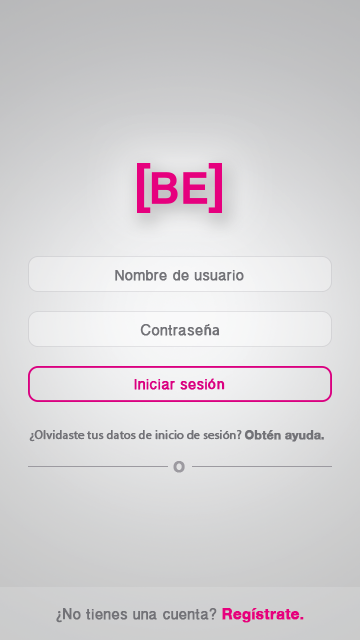
<style>
.page{position:relative;width:360px;height:640px}
.page>*{position:absolute;margin:0}
.t1{font:15px "MyanmarSangamMN";color:#727277;font-weight:bold}
.t2{font:15px "MyriadPro-Regular";color:#727277;font-weight:bold}
.t3{font:15px "MyanmarSangamMN";color:#da0080;font-weight:bold}
.t4{font:15px "MyriadPro-Regular";color:#da0080;font-weight:bold}
.t5{font:12px "MyriadPro-Regular";color:#727277;font-weight:bold}
.t6{font:12px "HelveticaNeue-Bold";color:#727277;font-weight:bold}
.t7{font:15px "HelveticaNeue-Bold";color:#9c9aa0;font-weight:bold}
.t8{font:15px "HelveticaNeue-Bold";color:#e6007e;font-weight:bold}
</style>
<div class="page">
<p class="t1" style="left:115px;top:270px;width:129px;height:11px">Nombre de usuario</p>
<p class="t1" style="left:140px;top:324px;width:80px;height:12px">Contrase<span class="t2">ña</span></p>
<p class="t3" style="left:134px;top:378px;width:91px;height:12px">Iniciar sesi<span class="t4">ón</span></p>
<p class="t5" style="left:29px;top:430px;width:295px;height:12px">¿Olvidaste tus datos de inicio de sesión? <span class="t6">Obtén ayuda.</span></p>
<p class="t7" style="left:173px;top:461px;width:12px;height:12px">O</p>
<p class="t1" style="left:56px;top:608px;width:248px;height:15px"><span class="t2">¿N</span>o tienes una cuenta? <span class="t8">Regístrate.</span></p>
</div>
